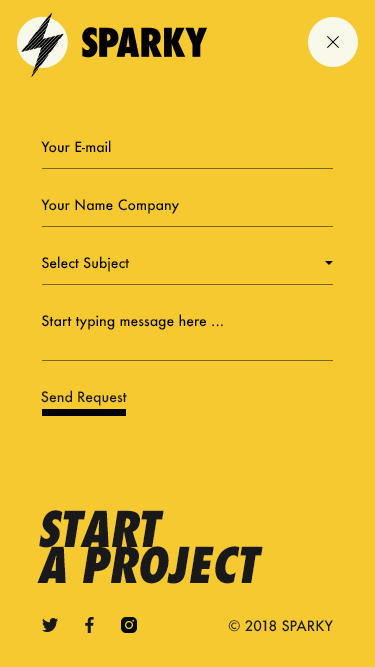
<style>
.page{position:relative;width:375px;height:667px;background:#f6c930}
.page>*{position:absolute;margin:0}
.t1{font:14px "Futura-Medium";color:#000000}
.t2{font:14px "Futura-Medium";color:#191919}
.t3{font:48px/36px "Futura-CondExtraBoldObl";color:#191919;text-transform:uppercase}
</style>
<div class="page">
<p class="t1" style="left:41px;top:140px;width:70px;height:13px">Your E-mail</p>
<p class="t1" style="left:41px;top:198px;width:138px;height:16px">Your Name Company</p>
<p class="t1" style="left:42px;top:256px;width:87px;height:16px">Select Subject</p>
<p class="t1" style="left:42px;top:314px;width:181px;height:16px">Start typing message here ...</p>
<p class="t2" style="left:41px;top:390px;width:86px;height:16px">Send Request</p>
<p class="t3" style="left:37px;top:510px;width:226px;height:74px">start <br>a project</p>
<p class="t2" style="left:228px;top:620px;width:105px;height:12px">© 2018 SPARKY</p>
</div>
